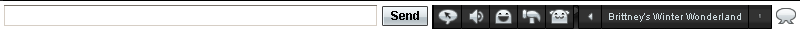
<style>
.page{position:relative;width:800px;height:29px;background:#ffffff}
.page>*{position:absolute;margin:0}
.t1{font:12px "Arial-BoldMT";color:#000000}
.t2{font:10px "ArialMT";color:#cfdce1}
</style>
<div class="page">
<p class="t1" style="left:391px;top:11px;width:28px;height:9px">Send</p>
<p class="t2" style="left:609px;top:13px;width:132px;height:9px">Brittney’s Winter Wonderland</p>
</div>
